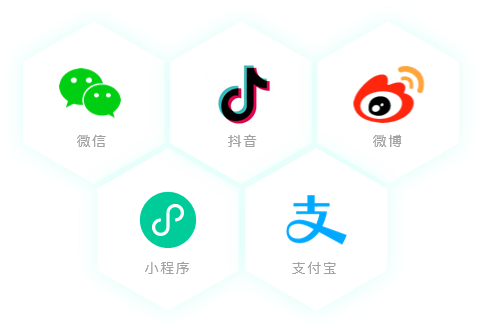
<style>
.page{position:relative;width:482px;height:332px;background:#ffffff}
.page>*{position:absolute;margin:0}
.t1{font:14px "PingFang-SC-Medium";letter-spacing:0.1em;color:#a1a1a1;text-transform:uppercase}
</style>
<div class="page">
<p class="t1" style="left:77px;top:134px;width:29px;height:13px">微信</p>
<p class="t1" style="left:228px;top:134px;width:29px;height:13px">抖音</p>
<p class="t1" style="left:373px;top:134px;width:29px;height:13px">微博</p>
<p class="t1" style="left:145px;top:261px;width:44px;height:13px">小程序</p>
<p class="t1" style="left:292px;top:261px;width:44px;height:13px">支付宝</p>
</div>
